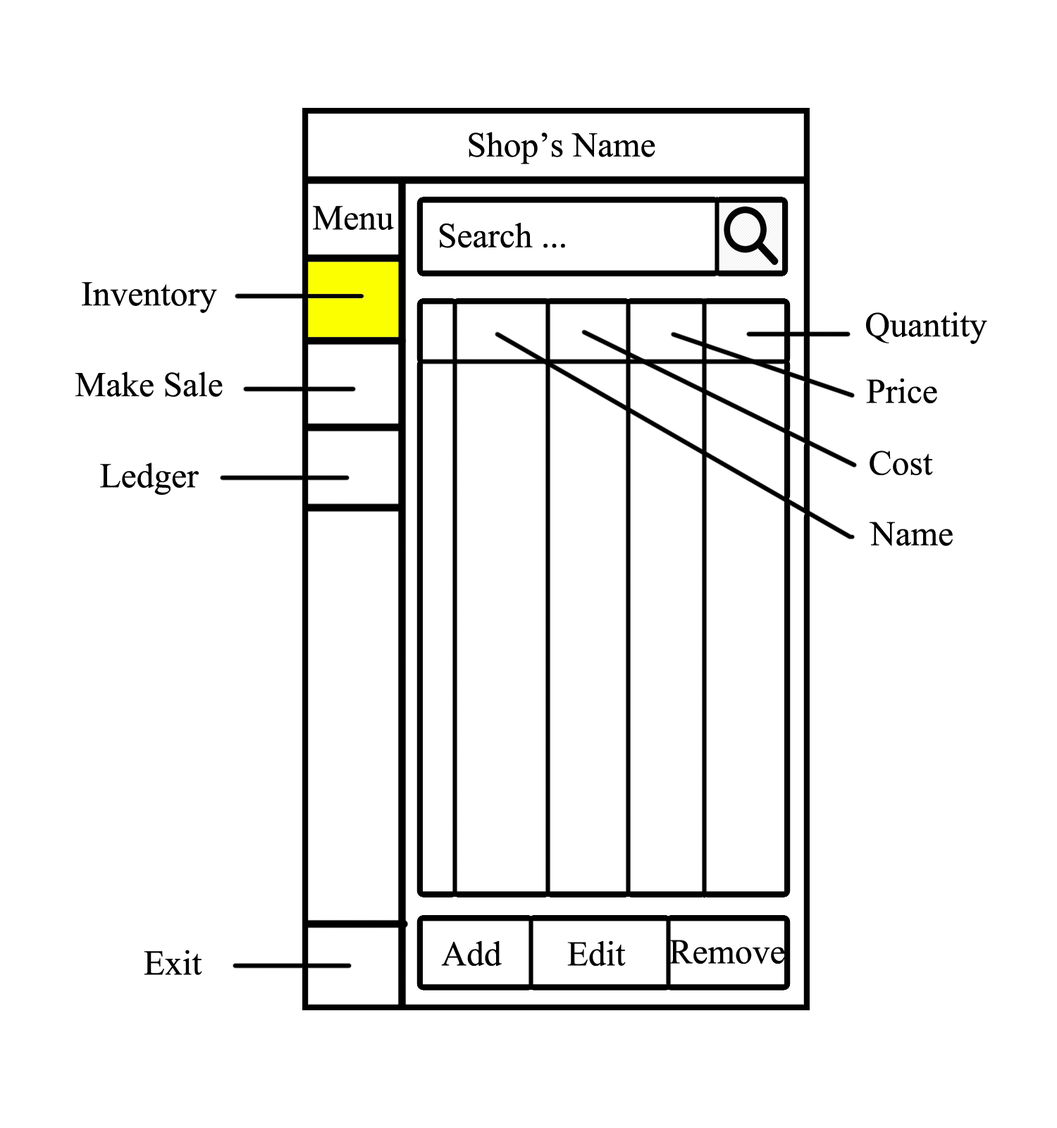
<style>
.page{position:relative;width:1057px;height:1128px;background:#ffffff}
.page>*{position:absolute;margin:0}
.t1{font:52.9px "AngsanaNew";color:#000000}
</style>
<div class="page">
<p class="t1" style="left:469px;top:132px;width:187px;height:32px">Shop’s Name</p>
<p class="t1" style="left:313px;top:206px;width:81px;height:24px">Menu</p>
<p class="t1" style="left:439px;top:223px;width:126px;height:25px">Search ...</p>
<p class="t1" style="left:82px;top:282px;width:135px;height:31px">Inventory</p>
<p class="t1" style="left:866px;top:312px;width:122px;height:32px">Quantity</p>
<p class="t1" style="left:75px;top:371px;width:148px;height:26px">Make Sale</p>
<p class="t1" style="left:866px;top:378px;width:71px;height:25px">Price</p>
<p class="t1" style="left:870px;top:450px;width:63px;height:25px">Cost</p>
<p class="t1" style="left:100px;top:462px;width:99px;height:33px">Ledger</p>
<p class="t1" style="left:870px;top:522px;width:83px;height:24px">Name</p>
<p class="t1" style="left:441px;top:940px;width:61px;height:26px">Add</p>
<p class="t1" style="left:567px;top:940px;width:59px;height:26px">Edit</p>
<p class="t1" style="left:670px;top:940px;width:115px;height:24px">Remove</p>
<p class="t1" style="left:144px;top:949px;width:58px;height:26px">Exit</p>
</div>
